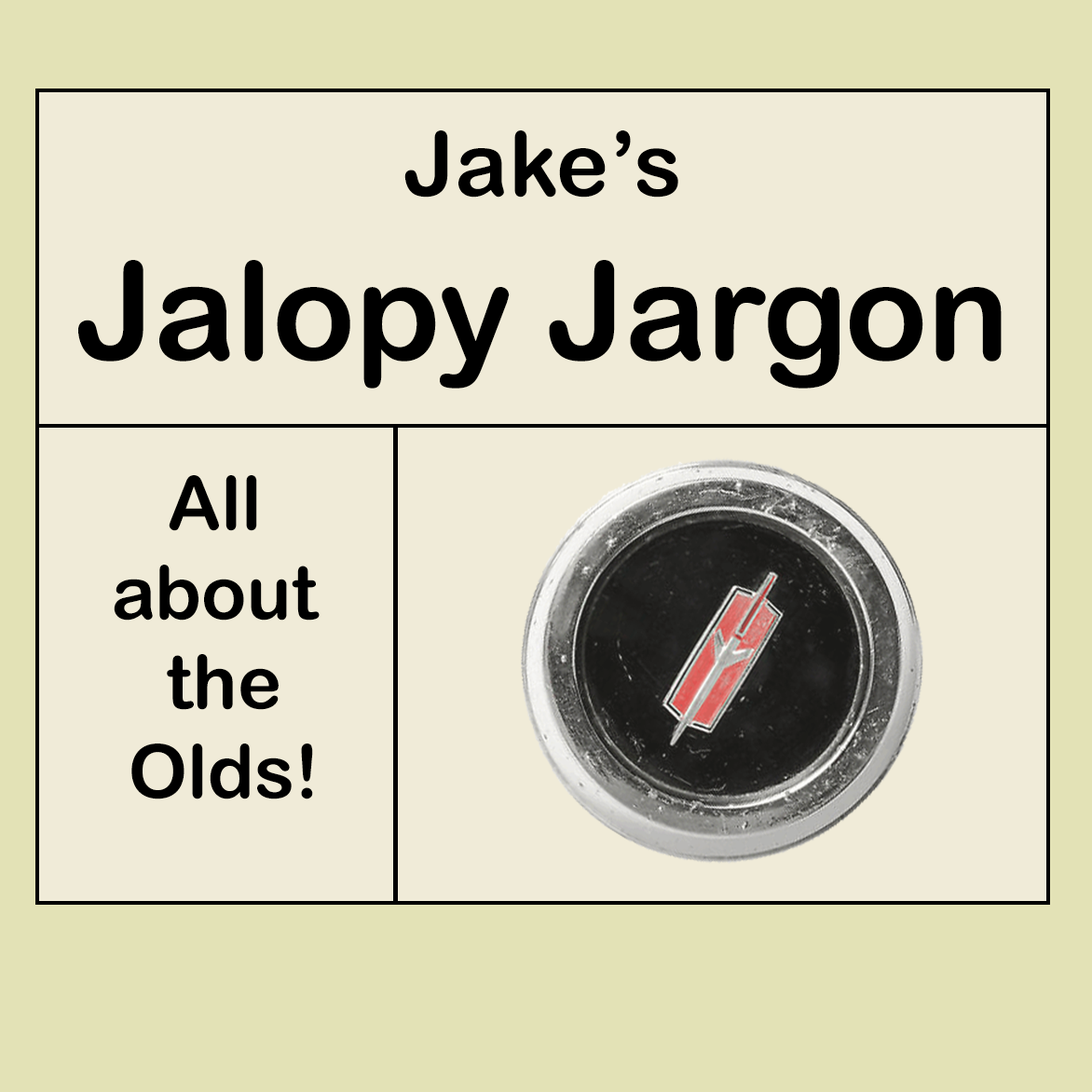
<style>
.page{position:relative;width:1092px;height:1092px;background:#f0ebd8}
.page>*{position:absolute;margin:0}
.t1{font:136.7px "ArialRoundedMTBold";color:#000000}
.t2{font:89.4px "ArialRoundedMTBold";color:#000000}
.t3{font:74.5px "ArialRoundedMTBold";color:#000000}
</style>
<div class="page">
<p class="t1" style="left:78px;top:130px;width:924px;height:259px;text-align:center"><span class="t2">Jake’s<br></span>Jalopy Jargon</p>
<p class="t3" style="left:114px;top:475px;width:206px;height:324px;text-align:center">All<br>about<br> the<br> Olds!</p>
</div>
